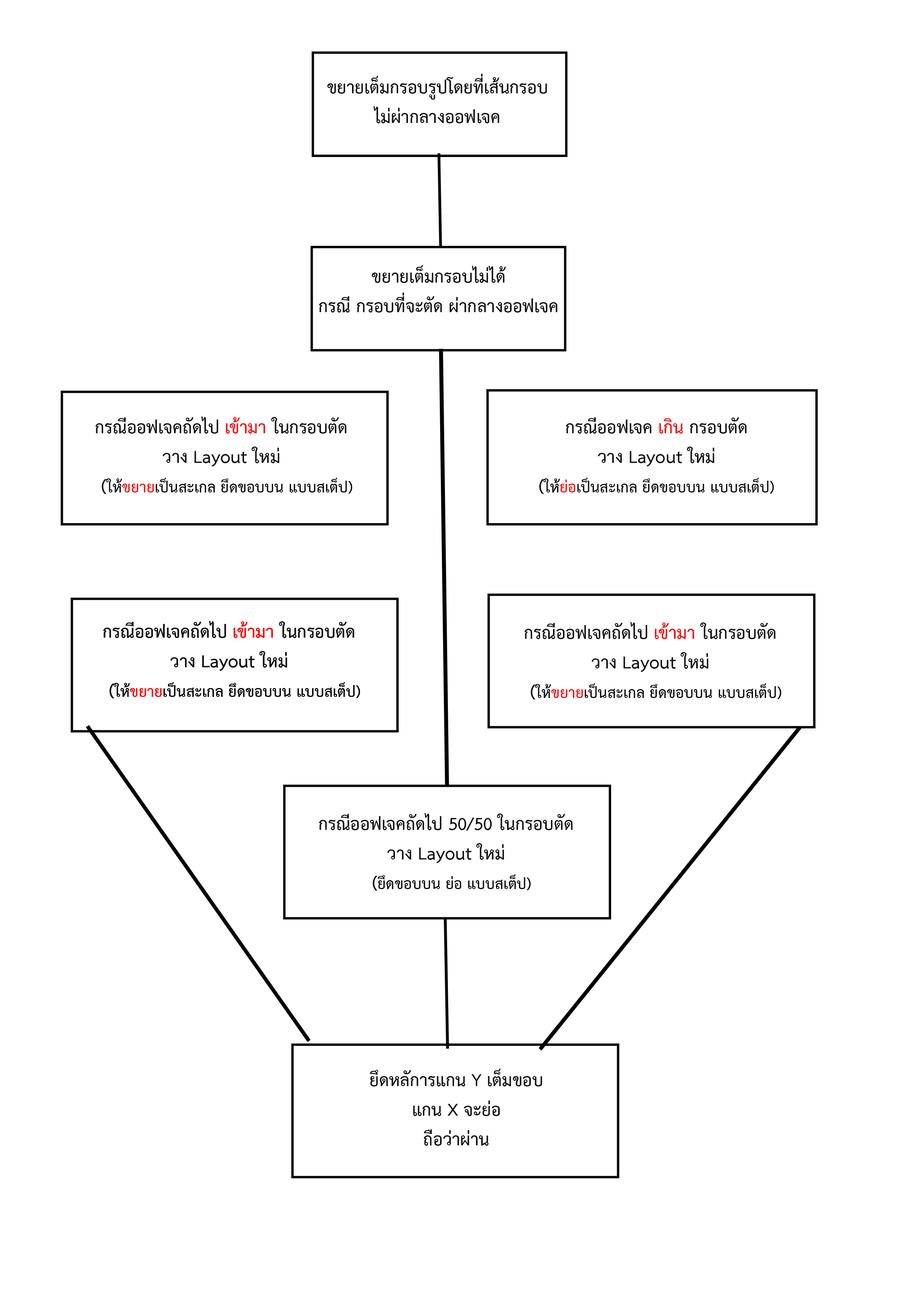
<style>
.page{position:relative;width:918px;height:1299px;background:#ffffff}
.page>*{position:absolute;margin:0}
.t1{font:24.7px "THSarabunPSK-Bold";color:#0c0c0c}
.t2{font:21.6px "THSarabunPSK-Bold";color:#000000}
.t3{font:24.7px "THSarabunPSK-Bold";color:#fb0303}
.t4{font:24.7px "THSarabunPSK-Bold";color:#050505}
.t5{font:21.6px "THSarabunPSK-Bold";color:#050505}
.t6{font:21.6px "THSarabunPSK-Bold";color:#fc0202}
.t7{font:21.6px "THSarabunPSK-Bold";color:#040404}
.t8{font:24.7px "THSarabunPSK-Bold";color:#fc0505}
.t9{font:24.7px "THSarabunPSK-Bold";color:#040404}
</style>
<div class="page">
<p class="t1" style="left:327px;top:74px;width:220px;height:49px;text-align:center">ขยายเต็มกรอบรูปโดยที่เส้นกรอบ    ไม่ผ่ากลางออฟเจค</p>
<p class="t1" style="left:319px;top:265px;width:239px;height:47px;text-align:center">ขยายเต็มกรอบไม่ได้<br>กรณี กรอบที่จะตัด ผ่ากลางออฟเจค</p>
<p class="t2" style="left:96px;top:416px;width:256px;height:78px;text-align:center"><span class="t1">กรณีออฟเจคถัดไป </span><span class="t3">เข้ามา </span><span class="t1">ในกรอบตัด<br>วาง Layout ใหม่<br>  </span><span class="t4">(</span><span class="t5">ให้</span><span class="t6">ขยาย</span>เป็นสะเกล ยึดขอบบน แบบสเต็ป)</p>
<p class="t7" style="left:539px;top:417px;width:235px;height:77px;text-align:center"><span class="t1">กรณีออฟเจค</span><span class="t8"> เกิน</span><span class="t1"> กรอบตัด<br>วาง Layout ใหม่<br></span><span class="t9">(</span>ให้<span class="t6">ย่อ</span>เป็นสะเกล ยึดขอบบน แบบสเต็ป)</p>
<p class="t2" style="left:103px;top:621px;width:257px;height:77px;text-align:center"><span class="t1">กรณีออฟเจคถัดไป </span><span class="t3">เข้ามา </span><span class="t1">ในกรอบตัด<br>วาง Layout ใหม่<br>  </span><span class="t4">(</span><span class="t5">ให้</span><span class="t6">ขยาย</span>เป็นสะเกล ยึดขอบบน แบบสเต็ป)</p>
<p class="t2" style="left:103px;top:621px;width:257px;height:77px;text-align:center"><span class="t1">กรณีออฟเจคถัดไป </span><span class="t3">เข้ามา </span><span class="t1">ในกรอบตัด<br>วาง Layout ใหม่<br>  </span><span class="t4">(</span><span class="t5">ให้</span><span class="t6">ขยาย</span>เป็นสะเกล ยึดขอบบน แบบสเต็ป)</p>
<p class="t2" style="left:525px;top:622px;width:257px;height:77px;text-align:center"><span class="t1">กรณีออฟเจคถัดไป </span><span class="t3">เข้ามา </span><span class="t1">ในกรอบตัด<br>วาง Layout ใหม่<br>  </span><span class="t4">(</span><span class="t5">ให้</span><span class="t6">ขยาย</span>เป็นสะเกล ยึดขอบบน แบบสเต็ป)</p>
<p class="t1" style="left:319px;top:813px;width:254px;height:77px;text-align:center">กรณีออฟเจคถัดไป 50/50 ในกรอบตัด<br>วาง Layout ใหม่<br>  <span class="t4">(</span><span class="t2">ยึดขอบบน ย่อ แบบสเต็ป)</span></p>
<p class="t1" style="left:370px;top:1068px;width:172px;height:77px;text-align:center">ยึดหลัการแกน Y เต็มขอบ<br>แกน X จะย่อ<br>ถือว่าผ่าน</p>
</div>
